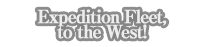
<style>
.page{position:relative;width:204px;height:47px;background:#ffffff}
.page>*{position:absolute;margin:0}
.t1{font:18px/15px "RyuminPro-ExBold";letter-spacing:-0.08em;color:#ededed;font-weight:bold}
</style>
<div class="page">
<p class="t1" style="left:37px;top:9px;width:130px;height:30px;text-align:center">Expedition Fleet,<br>to the West!</p>
</div>
